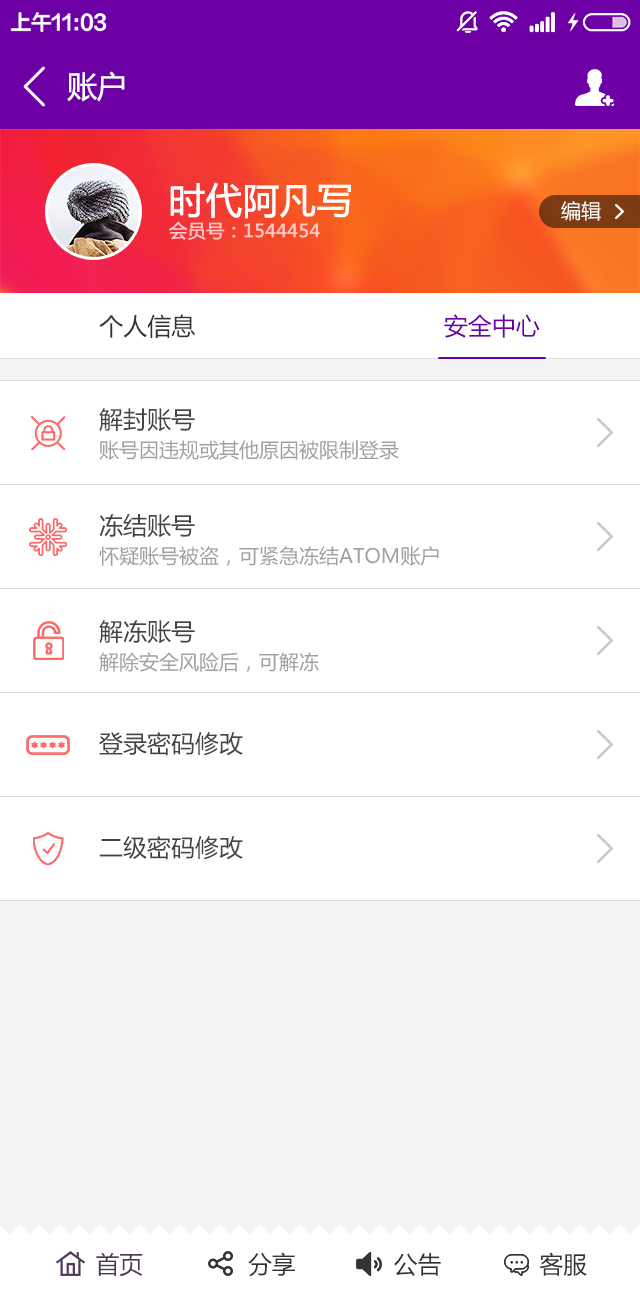
<style>
.page{position:relative;width:640px;height:1292px;background:#ffffff}
.page>*{position:absolute;margin:0}
.t1{font:30px "MicrosoftYaHei";color:#ffffff}
.t2{font:18px/24px "MicrosoftYaHei";color:#ffc9c9;text-transform:uppercase;font-weight:bold}
.t3{font:36px/24px "MicrosoftYaHei";color:#ffffff;text-transform:uppercase;font-weight:bold}
.t4{font:20px "MicrosoftYaHei";color:#ffffff;text-transform:uppercase}
.t5{font:24px "MicrosoftYaHei";color:#333333;text-transform:uppercase}
.t6{font:24px "MicrosoftYaHei";color:#6d00a5;text-transform:uppercase}
.t7{font:24px/53px "MicrosoftYaHei";color:#444444;text-transform:uppercase}
.t8{font:24px/52px "MicrosoftYaHei";color:#444444;text-transform:uppercase}
.t9{font:20px/53px "MicrosoftYaHei";color:#a0a0a0;text-transform:uppercase}
.t10{font:24px "MicrosoftYaHei";color:#333333}
.t11{font:24px "MicrosoftYaHei";color:#50385b}
</style>
<div class="page">
<p class="t1" style="left:67px;top:71px;width:58px;height:31px">账户</p>
<p class="t2" style="left:169px;top:182px;width:182px;height:58px"><span class="t3">时代阿凡写<br></span>会员号：1544454</p>
<p class="t4" style="left:561px;top:201px;width:40px;height:20px">编辑</p>
<p class="t5" style="left:99px;top:314px;width:441px;height:24px">个人信息                                   <span class="t6">安全中心</span></p>
<p class="t7" style="left:99px;top:408px;width:144px;height:452px">解封账号<br><br>冻结账号<br><br>解冻账号<br><br><span class="t8">登录密码修改<br><br>二级密码修改</span></p>
<p class="t9" style="left:99px;top:440px;width:340px;height:232px">账号因违规或其他原因被限制登录<br><br>怀疑账号被盗，可紧急冻结atom账户<br><br>解除安全风险后，可解冻</p>
<p class="t10" style="left:96px;top:1252px;width:491px;height:25px"><span class="t11">首页</span>               分享              公告              客服</p>
</div>
